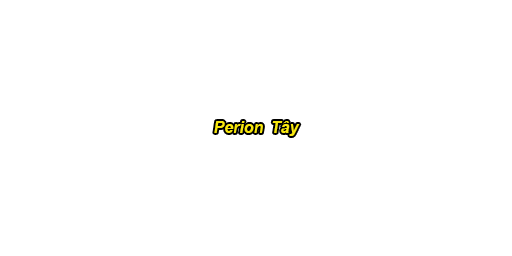
<style>
.page{position:relative;width:512px;height:256px;background:#ffffff}
.page>*{position:absolute;margin:0}
.t1{font:12px "Arial-BoldItalicMT";color:#f8e810}
</style>
<div class="page">
<p class="t1" style="left:214px;top:121px;width:49px;height:12px">Perion</p>
<p class="t1" style="left:272px;top:121px;width:28px;height:15px">Tây</p>
</div>
